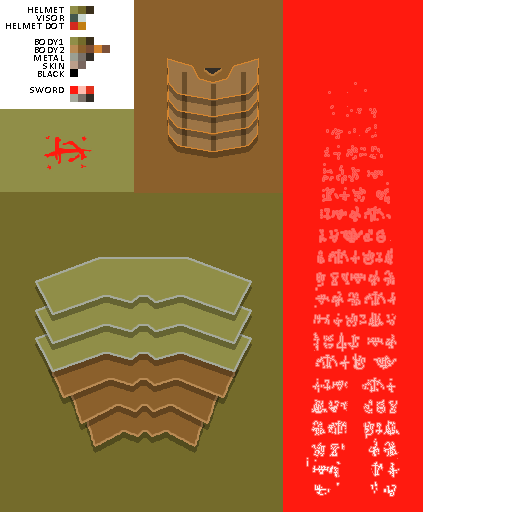
<style>
.page{position:relative;width:512px;height:512px;background:#ff1a0f}
.page>*{position:absolute;margin:0}
.t1{font:10px/8px "Calibri";letter-spacing:0.05em;color:#000000}
</style>
<div class="page">
<p class="t1" style="left:6px;top:7px;width:58px;height:86px;text-align:right">HELMET<br>VISOR<br>HELMET DOT<br><br>BODY1<br>BODY2<br>METAL<br>SKIN<br>BLACK<br><br>SWORD</p>
</div>
